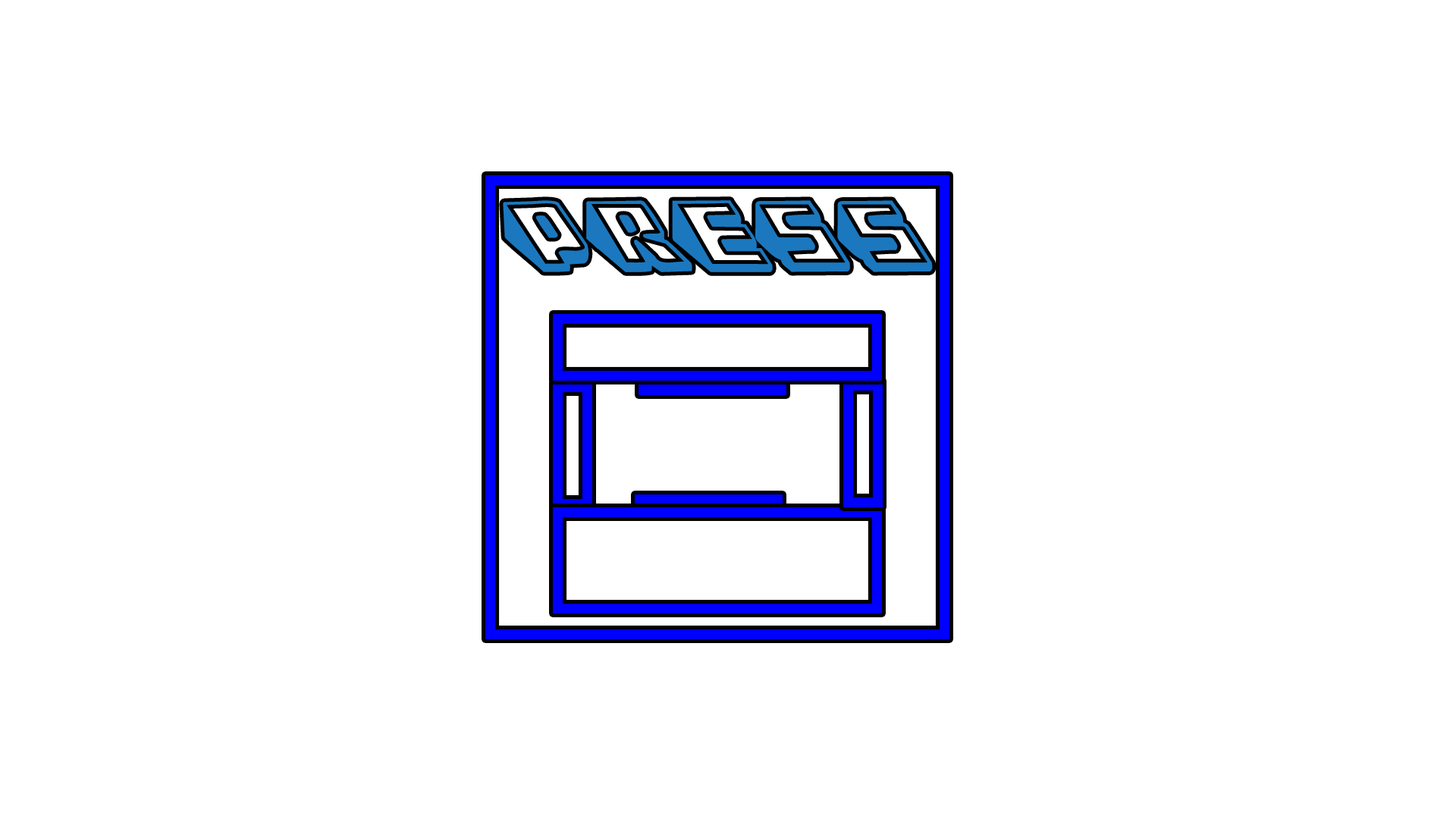
<style>
.page{position:relative;width:1456px;height:819px;background:#ffffff}
.page>*{position:absolute;margin:0}
.t1{font:82.9px "Wedgie-Regular";color:#1b78bf;text-transform:uppercase;font-weight:bold}
</style>
<div class="page">
<p class="t1" style="left:503px;top:200px;width:430px;height:72px">Press</p>
</div>
